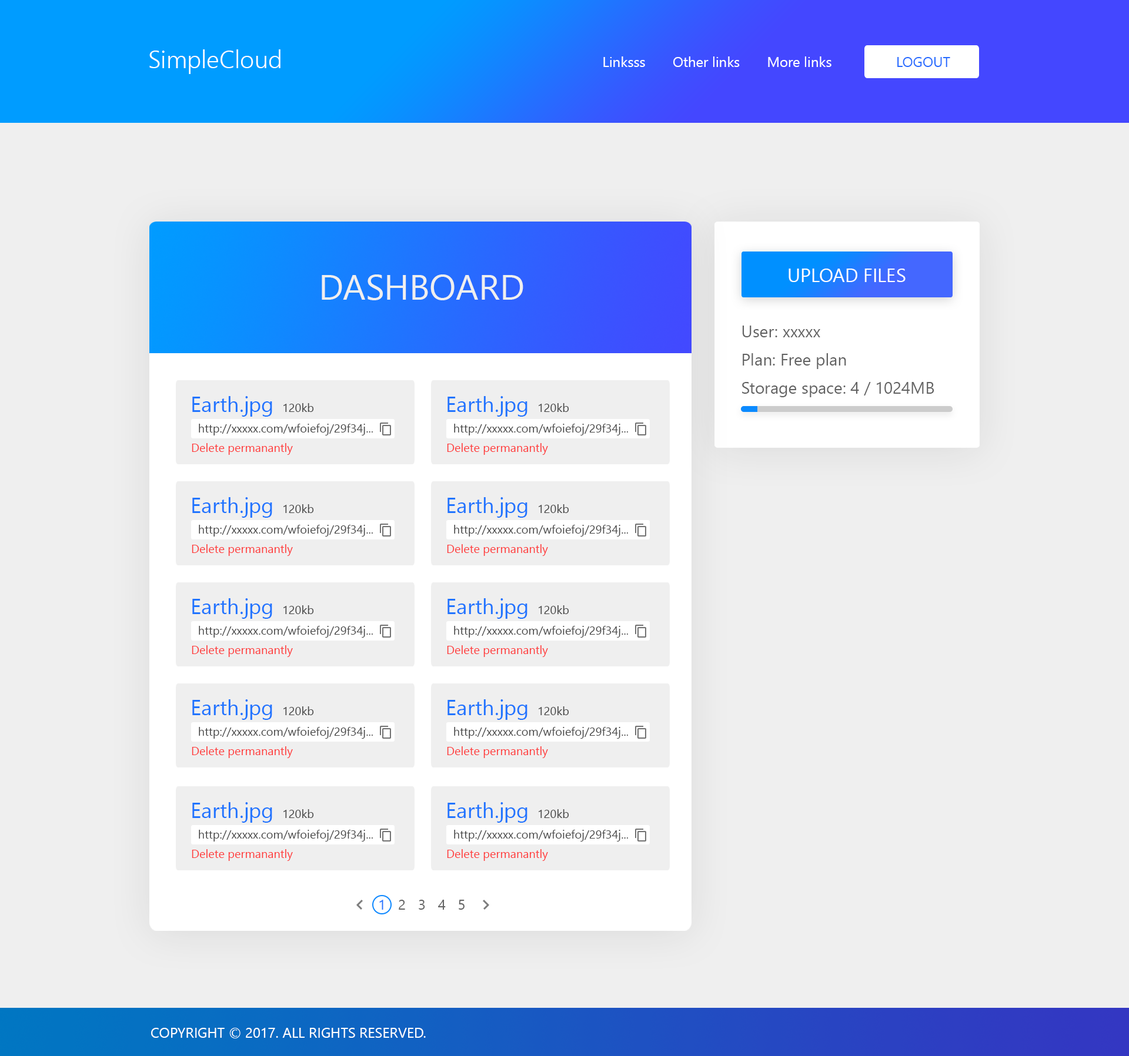
<style>
.page{position:relative;width:1129px;height:1056px;background:#efefef}
.page>*{position:absolute;margin:0}
.t1{font:24.7px "NirmalaUI-Semilight";color:#ffffff}
.t2{font:14.1px "NirmalaUI";color:#ffffff}
.t3{font:14.1px "NirmalaUI";color:#276cff}
.t4{font:18.8px "NirmalaUI";color:#ffffff}
.t5{font:35.3px "NirmalaUI";color:#efefef}
.t6{font:16.5px/28.2px "NirmalaUI";color:#626262}
.t7{font:21.2px "NirmalaUI";color:#2074ff}
.t8{font:11.8px "NirmalaUI";color:#464646}
.t9{font:11.8px "NirmalaUI";color:#ff3939}
.t10{font:14.1px "NirmalaUI";letter-spacing:0.3em;color:#656565}
.t11{font:14.1px "NirmalaUI";letter-spacing:0.3em;color:#2074ff}
</style>
<div class="page">
<p class="t1" style="left:149px;top:49px;width:131px;height:25px">SimpleCloud</p>
<p class="t2" style="left:603px;top:56px;width:228px;height:11px">Linksss       Other links       More links</p>
<p class="t3" style="left:897px;top:57px;width:53px;height:10px">LOGOUT</p>
<p class="t4" style="left:788px;top:269px;width:117px;height:13px">UPLOAD FILES</p>
<p class="t5" style="left:322px;top:275px;width:201px;height:25px">DASHBOARD</p>
<p class="t6" style="left:742px;top:326px;width:192px;height:71px">User: xxxxx<br>Plan: Free plan<br>Storage space: 4 / 1024MB</p>
<p class="t7" style="left:192px;top:396px;width:80px;height:21px">Earth.jpg</p>
<p class="t7" style="left:447px;top:396px;width:80px;height:21px">Earth.jpg</p>
<p class="t8" style="left:283px;top:403px;width:31px;height:9px">120kb</p>
<p class="t8" style="left:539px;top:403px;width:30px;height:9px">120kb</p>
<p class="t8" style="left:199px;top:424px;width:174px;height:12px">http://xxxxx.com/wfoiefoj/29f34j...</p>
<p class="t8" style="left:454px;top:424px;width:174px;height:12px">http://xxxxx.com/wfoiefoj/29f34j...</p>
<p class="t9" style="left:192px;top:443px;width:101px;height:12px">Delete permanantly</p>
<p class="t9" style="left:447px;top:443px;width:101px;height:12px">Delete permanantly</p>
<p class="t7" style="left:192px;top:497px;width:80px;height:21px">Earth.jpg</p>
<p class="t7" style="left:447px;top:497px;width:80px;height:21px">Earth.jpg</p>
<p class="t8" style="left:283px;top:504px;width:31px;height:9px">120kb</p>
<p class="t8" style="left:539px;top:504px;width:30px;height:9px">120kb</p>
<p class="t8" style="left:199px;top:525px;width:174px;height:12px">http://xxxxx.com/wfoiefoj/29f34j...</p>
<p class="t8" style="left:454px;top:525px;width:174px;height:12px">http://xxxxx.com/wfoiefoj/29f34j...</p>
<p class="t9" style="left:192px;top:544px;width:101px;height:12px">Delete permanantly</p>
<p class="t9" style="left:447px;top:544px;width:101px;height:12px">Delete permanantly</p>
<p class="t7" style="left:192px;top:598px;width:80px;height:21px">Earth.jpg</p>
<p class="t8" style="left:283px;top:606px;width:31px;height:8px">120kb</p>
<p class="t7" style="left:447px;top:598px;width:80px;height:21px">Earth.jpg</p>
<p class="t8" style="left:539px;top:606px;width:30px;height:8px">120kb</p>
<p class="t8" style="left:199px;top:626px;width:174px;height:12px">http://xxxxx.com/wfoiefoj/29f34j...</p>
<p class="t8" style="left:454px;top:626px;width:174px;height:12px">http://xxxxx.com/wfoiefoj/29f34j...</p>
<p class="t9" style="left:192px;top:645px;width:101px;height:12px">Delete permanantly</p>
<p class="t9" style="left:447px;top:645px;width:101px;height:12px">Delete permanantly</p>
<p class="t7" style="left:192px;top:700px;width:80px;height:20px">Earth.jpg</p>
<p class="t7" style="left:447px;top:700px;width:80px;height:20px">Earth.jpg</p>
<p class="t8" style="left:283px;top:707px;width:31px;height:8px">120kb</p>
<p class="t8" style="left:539px;top:707px;width:30px;height:8px">120kb</p>
<p class="t8" style="left:199px;top:727px;width:174px;height:12px">http://xxxxx.com/wfoiefoj/29f34j...</p>
<p class="t8" style="left:454px;top:727px;width:174px;height:12px">http://xxxxx.com/wfoiefoj/29f34j...</p>
<p class="t9" style="left:192px;top:747px;width:101px;height:11px">Delete permanantly</p>
<p class="t9" style="left:447px;top:747px;width:101px;height:11px">Delete permanantly</p>
<p class="t7" style="left:192px;top:802px;width:80px;height:21px">Earth.jpg</p>
<p class="t8" style="left:283px;top:810px;width:31px;height:8px">120kb</p>
<p class="t7" style="left:447px;top:802px;width:80px;height:21px">Earth.jpg</p>
<p class="t8" style="left:539px;top:810px;width:30px;height:8px">120kb</p>
<p class="t8" style="left:199px;top:830px;width:174px;height:12px">http://xxxxx.com/wfoiefoj/29f34j...</p>
<p class="t8" style="left:454px;top:830px;width:174px;height:12px">http://xxxxx.com/wfoiefoj/29f34j...</p>
<p class="t9" style="left:192px;top:849px;width:101px;height:12px">Delete permanantly</p>
<p class="t9" style="left:447px;top:849px;width:101px;height:12px">Delete permanantly</p>
<p class="t10" style="left:379px;top:900px;width:85px;height:10px"><span class="t11">1</span> 2 3 4 5</p>
<p class="t2" style="left:151px;top:1028px;width:275px;height:11px">COPYRIGHT © 2017. ALL RIGHTS RESERVED.</p>
</div>
